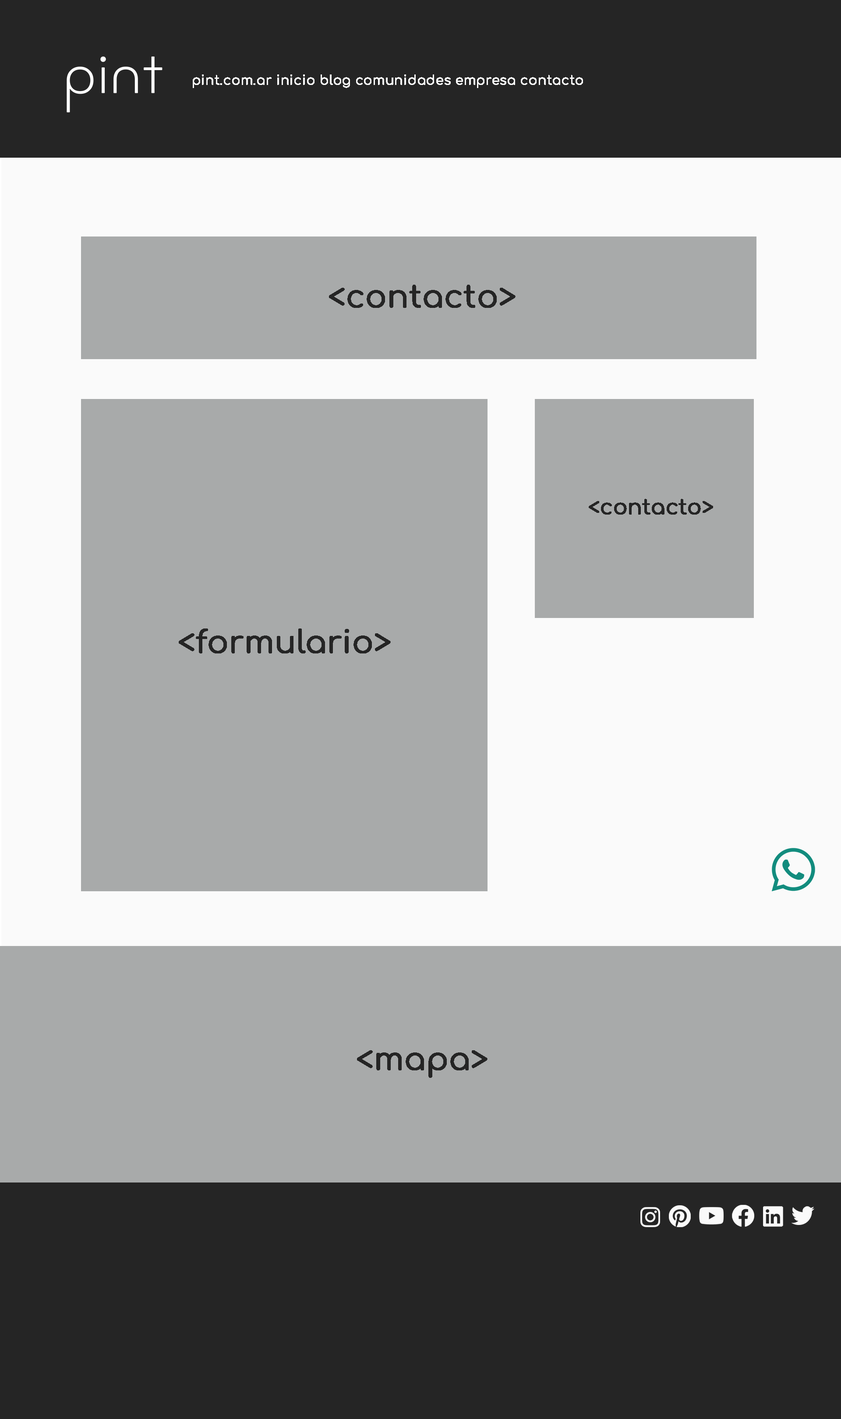
<style>
.page{position:relative;width:841px;height:1419px;background:#a8aaaa}
.page>*{position:absolute;margin:0}
.t1{font:13.1px "Comfortaa-Medium";letter-spacing:-0.01em;color:#fafafa;font-weight:bold}
.t2{font:31.5px "Comfortaa-Medium";letter-spacing:-0.01em;color:#252525;font-weight:bold}
.t3{font:21px "Comfortaa-Medium";letter-spacing:-0.01em;color:#252525;font-weight:bold}
</style>
<div class="page">
<p class="t1" style="left:193px;top:74px;width:390px;height:14px">pint.com.ar inicio blog comunidades empresa contacto</p>
<p class="t2" style="left:329px;top:285px;width:186px;height:23px">&lt;contacto&gt;</p>
<p class="t3" style="left:588px;top:499px;width:125px;height:15px">&lt;contacto&gt;</p>
<p class="t2" style="left:179px;top:628px;width:212px;height:25px">&lt;formulario&gt;</p>
<p class="t2" style="left:357px;top:1050px;width:130px;height:27px">&lt;mapa&gt;</p>
</div>
